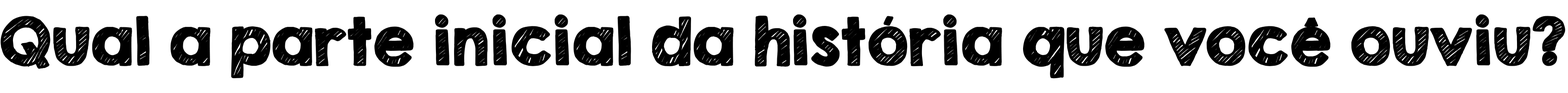
<style>
.page{position:relative;width:1568px;height:93px;background:#ffffff}
.page>*{position:absolute;margin:0}
.t1{font:58px "KGSecondChancesSketch";color:#000000;font-weight:bold}
</style>
<div class="page">
<p class="t1" style="left:0px;top:14px;width:1565px;height:65px">Qual a parte inicial da história que você ouviu?</p>
</div>
